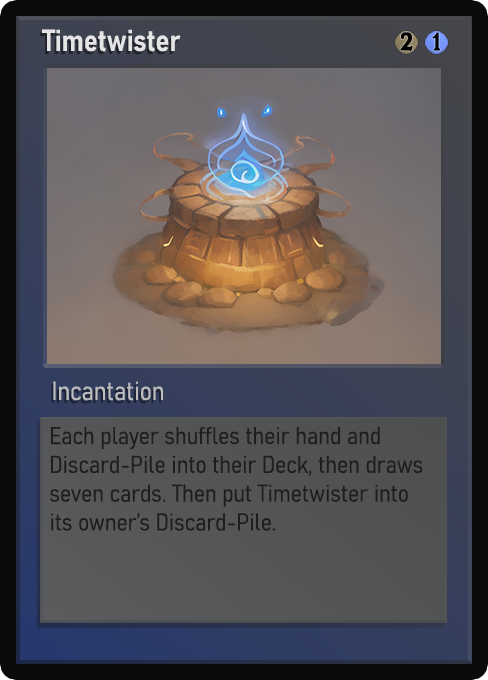
<style>
.page{position:relative;width:488px;height:680px}
.page>*{position:absolute;margin:0}
.t1{font:30px "Bahnschrift-SemiBoldSemiCondensed";color:#f2f2f2;font-weight:bold}
.t2{font:25px "WTRRoycroft";color:#000000;font-weight:bold;scale:1.09 1}
.t3{font:26px "Bahnschrift-LightSemiCondensed";color:#c8c8c8;font-weight:bold}
.t4{font:24px "Bahnschrift-LightSemiCondensed";color:#1e1e1e;font-weight:bold}
</style>
<div class="page">
<p class="t1" style="left:42px;top:29px;width:139px;height:23px;opacity:0.9">Timetwister</p>
<p class="t2" style="left:400px;top:32px;width:13px;height:19px">2</p>
<p class="t2" style="left:432px;top:32px;width:9px;height:19px">1</p>
<p class="t3" style="left:53px;top:381px;width:110px;height:20px;opacity:0.9">Incantation</p>
<p class="t4" style="left:50px;top:427px;width:373px;height:104px">Each player shuffles their hand and Discard-Pile into their Deck, then draws seven cards. Then put Timetwister into its owner’s Discard-Pile.</p>
</div>
